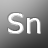
<style>
.page{position:relative;width:48px;height:48px}
.page>*{position:absolute;margin:0}
.t1{font:27px "Tahoma";color:#ffffff;scale:1.11 1}
</style>
<div class="page">
<p class="t1" style="left:8px;top:13px;width:32px;height:20px">Sn</p>
</div>
